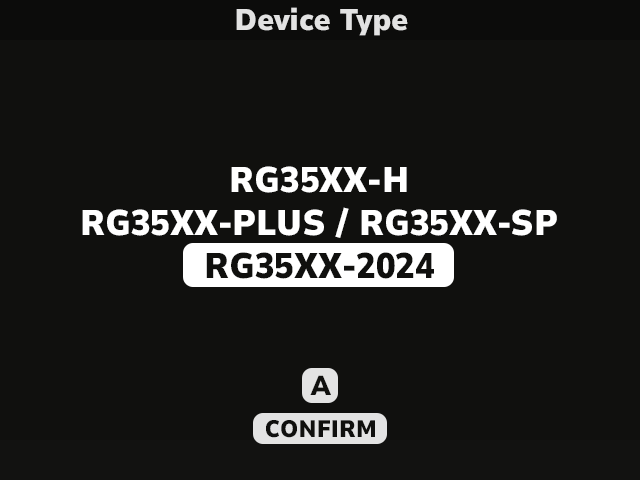
<style>
.page{position:relative;width:640px;height:480px;background:#10100e}
.page>*{position:absolute;margin:0}
.t1{font:29.8px "NunitoSans7ptSemiCondensed-Black";color:#e2e2e2}
.t2{font:35.6px "NunitoSans7ptSemiCondensed-Black";color:#ffffff}
.t3{font:35.6px "NunitoSans7ptSemiCondensed-Black";color:#10100e}
.t4{font:27.3px "NunitoSans7ptSemiCondensed-Black";color:#111111}
.t5{font:23.8px "NunitoSans7ptSemiCondensed-Black";color:#111111}
</style>
<div class="page">
<p class="t1" style="left:236px;top:7px;width:172px;height:29px">Device Type</p>
<p class="t2" style="left:82px;top:166px;width:475px;height:113px;text-align:center">RG35XX-H<br>RG35XX-PLUS / RG35XX-SP<br><span class="t3">RG35XX-2024</span></p>
<p class="t4" style="left:310px;top:375px;width:21px;height:20px">A</p>
<p class="t5" style="left:266px;top:420px;width:109px;height:18px">CONFIRM</p>
</div>
